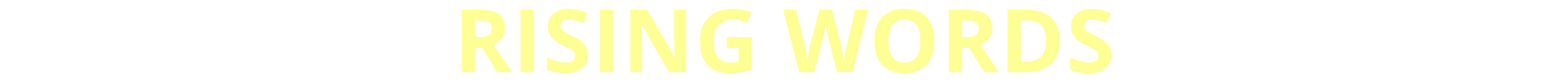
<style>
.page{position:relative;width:1568px;height:84px;background:#ffffff}
.page>*{position:absolute;margin:0}
.t1{font:88.2px "OpenSans-Bold";letter-spacing:0.01em;color:#fdff94;text-transform:uppercase}
</style>
<div class="page">
<p class="t1" style="left:462px;top:9px;width:649px;height:65px">rising words</p>
</div>
